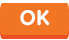
<style>
.page{position:relative;width:69px;height:40px;background:#f27524}
.page>*{position:absolute;margin:0}
.t1{font:22px "Linotte-Bold";color:#ffffff}
</style>
<div class="page">
<p class="t1" style="left:20px;top:10px;width:30px;height:16px">OK</p>
</div>
